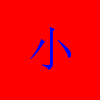
<style>
.page{position:relative;width:100px;height:100px;background:#ff0000}
.page>*{position:absolute;margin:0}
.t1{font:48px "SimSun";color:#0000ff}
</style>
<div class="page">
<p class="t1" style="left:30px;top:27px;width:41px;height:43px">小</p>
</div>
